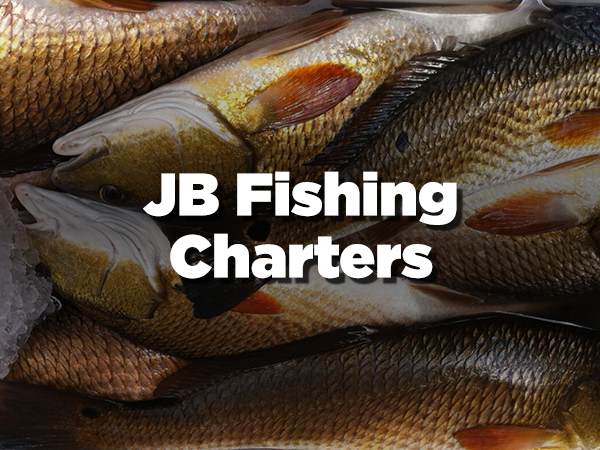
<style>
.page{position:relative;width:600px;height:450px}
.page>*{position:absolute;margin:0}
.t1{font:60px/62px "Gotham-Ultra";color:#ffffff}
</style>
<div class="page">
<p class="t1" style="left:143px;top:171px;width:314px;height:108px;text-align:center">JB Fishing<br>Charters</p>
</div>
